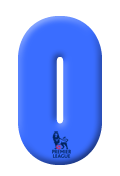
<style>
.page{position:relative;width:120px;height:176px;background:#ffffff}
.page>*{position:absolute;margin:0}
.t1{font:202px "PoplarStd";color:#3a6dff}
</style>
<div class="page">
<p class="t1" style="left:18px;top:16px;width:84px;height:149px">0</p>
</div>
